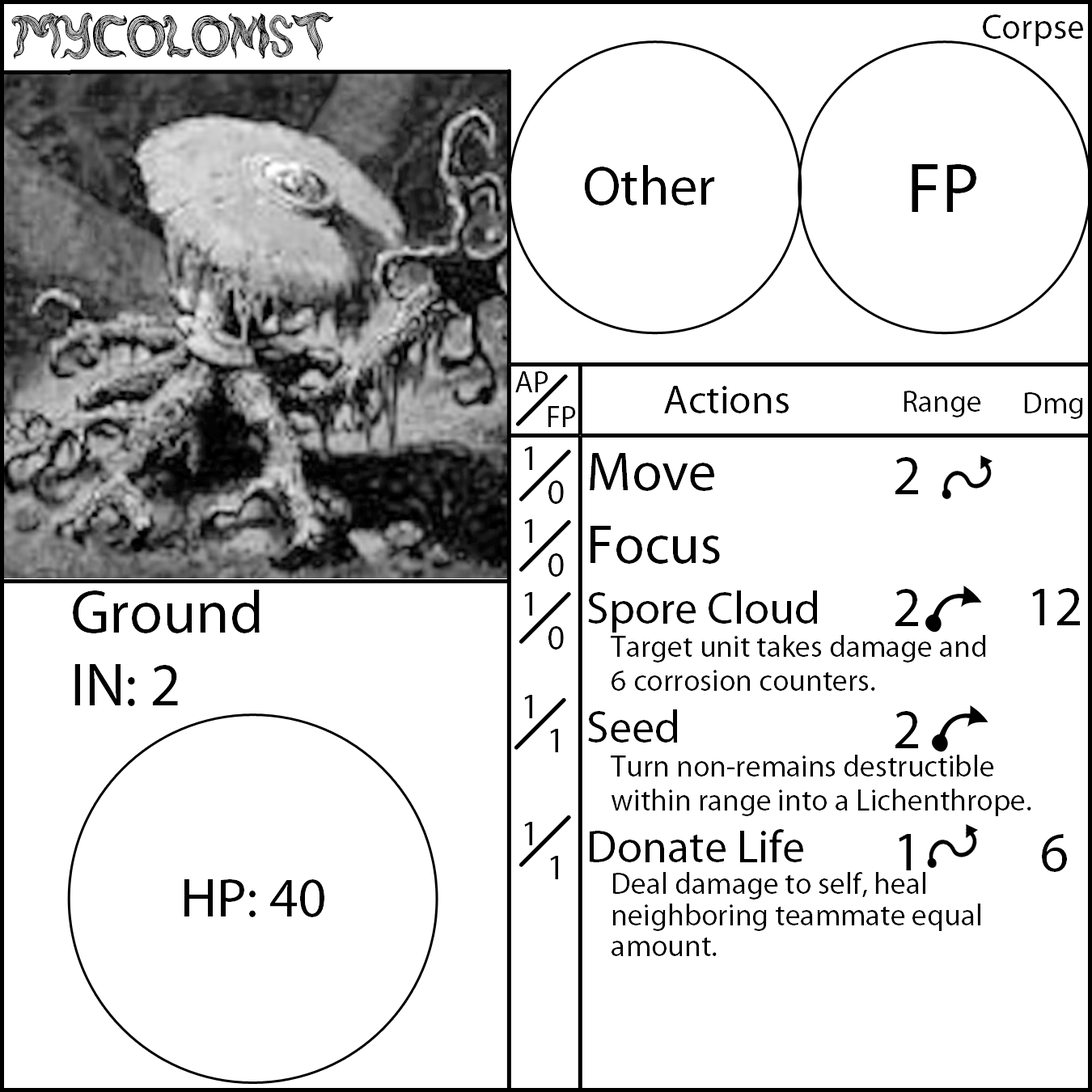
<style>
.page{position:relative;width:1092px;height:1092px;background:#ffffff}
.page>*{position:absolute;margin:0}
.t1{font:60.7px "rambutkusut";color:#000000}
.t2{font:55.6px "MyriadPro-Regular";color:#000000}
.t3{font:70.8px "MyriadPro-Regular";color:#000000}
.t4{font:30.3px "MyriadPro-Regular";color:#000000}
.t5{font:40.4px "MyriadPro-Regular";color:#000000}
.t6{font:35.4px "MyriadPro-Regular";color:#000000}
.t7{font:45.5px "MyriadPro-Regular";color:#000000}
.t8{font:60.7px "MyriadPro-Regular";color:#000000}
</style>
<div class="page">
<p class="t1" style="left:11px;top:11px;width:323px;height:50px">Mycolonist</p>
<p class="t2" style="left:584px;top:165px;width:131px;height:40px">Other</p>
<p class="t3" style="left:912px;top:164px;width:64px;height:48px">FP</p>
<p class="t4" style="left:515px;top:371px;width:33px;height:21px">AP</p>
<p class="t5" style="left:664px;top:386px;width:125px;height:27px">Actions</p>
<p class="t4" style="left:904px;top:391px;width:77px;height:26px">Range</p>
<p class="t4" style="left:1024px;top:392px;width:59px;height:27px">Dmg</p>
<p class="t4" style="left:548px;top:406px;width:28px;height:21px">FP</p>
<p class="t6" style="left:524px;top:447px;width:8px;height:398px">1<br>1<br>1<br>1 <br>1</p>
<p class="t4" style="left:588px;top:453px;width:443px;height:503px"><span class="t2">Move<br>Focus<br></span><span class="t7">Spore Cloud<br></span> Target unit takes damage and <br> 6 corrosion counters.<br><span class="t7">Seed<br></span> Turn non-remains destructible<br> within range into a Lichenthrope.<br><span class="t7">Donate Life<br></span> Deal damage to self, heal <br> neighboring teammate equal  <br> amount.</p>
<p class="t2" style="left:895px;top:457px;width:23px;height:413px;text-align:center">2<br> <br>2<br> <br>2<br> <br>1</p>
<p class="t6" style="left:548px;top:480px;width:16px;height:399px">0<br>0<br>0<br>1 <br>1</p>
<p class="t8" style="left:73px;top:590px;width:187px;height:116px">Ground<br>IN: 2</p>
<p class="t2" style="left:1032px;top:588px;width:48px;height:284px;text-align:center">12<br><br> <br>6</p>
<p class="t2" style="left:184px;top:879px;width:140px;height:38px">HP: 40</p>
</div>
